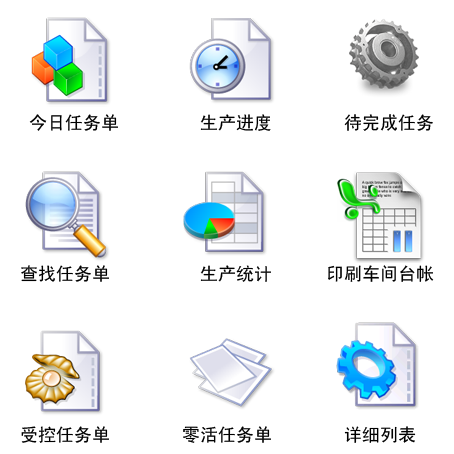
<style>
.page{position:relative;width:454px;height:454px;background:#ffffff}
.page>*{position:absolute;margin:0}
.t1{font:18px "SimHei";color:#000000}
</style>
<div class="page">
<p class="t1" style="left:21px;top:114px;width:413px;height:329px">今日任务单         生产进度        待完成任务<br><br><br><br><br><br><br>查找任务单          生产统计      印刷车间台帐<br><br><br><br><br><br><br><br>受控任务单        零活任务单        详细列表</p>
</div>
